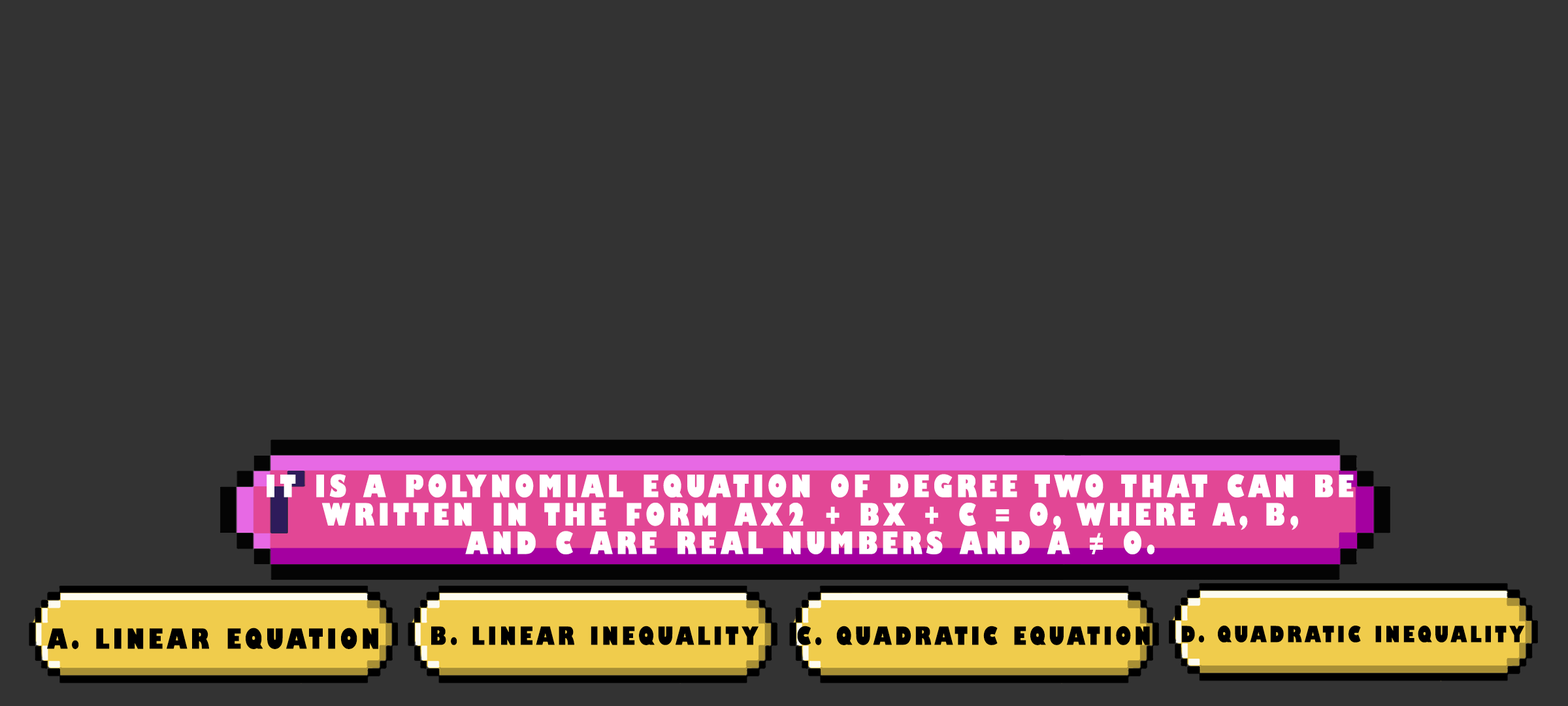
<style>
.page{position:relative;width:1568px;height:706px;background:#333333}
.page>*{position:absolute;margin:0}
.t1{font:30px/28.4px "GillSans-UltraBoldCondensed";letter-spacing:0.115em;color:#ffffff;text-transform:uppercase;scale:1.12 1}
.t2{font:27.2px "GillSans-UltraBoldCondensed";letter-spacing:0.115em;color:#000000;text-transform:uppercase;scale:1.12 1}
.t3{font:24.5px "GillSans-UltraBoldCondensed";letter-spacing:0.115em;color:#000000;text-transform:uppercase;scale:1.12 1}
.t4{font:21.8px "GillSans-UltraBoldCondensed";letter-spacing:0.115em;color:#000000;text-transform:uppercase;scale:1.12 1}
</style>
<div class="page">
<p class="t1" style="left:267px;top:474px;width:1087px;height:80px;text-align:center">It is a polynomial equation of degree two that can be<br>written in the form ax2 + bx + c = 0, where a, b,<br>and c are real numbers and a ≠ 0.</p>
<p class="t2" style="left:47px;top:627px;width:331px;height:22px">a. Linear Equation</p>
<p class="t3" style="left:431px;top:625px;width:328px;height:20px">b. Linear Inequality</p>
<p class="t3" style="left:797px;top:625px;width:353px;height:20px">c. Quadratic Equation</p>
<p class="t4" style="left:1181px;top:625px;width:344px;height:17px">d. Quadratic Inequality</p>
</div>
